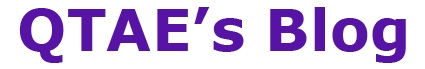
<style>
.page{position:relative;width:425px;height:69px;background:#ffffff}
.page>*{position:absolute;margin:0}
.t1{font:58.3px "Verdana-Bold";color:#5713a5}
</style>
<div class="page">
<p class="t1" style="left:19px;top:7px;width:387px;height:56px">QTAE’s Blog</p>
</div>
